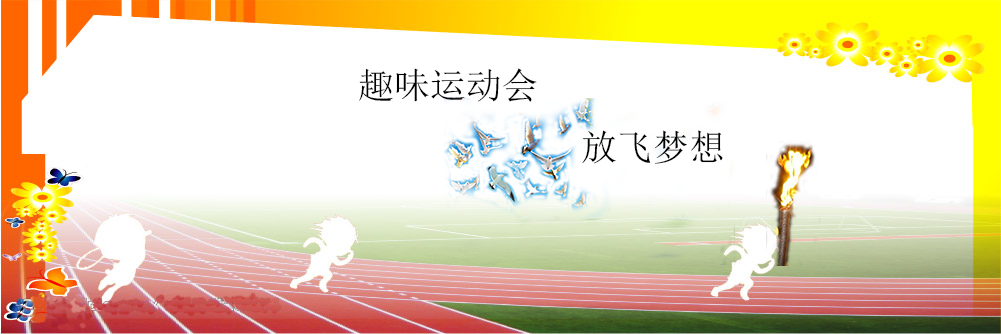
<style>
.page{position:relative;width:1001px;height:334px;background:#ffffff}
.page>*{position:absolute;margin:0}
.t1{font:36px "SimSun";color:#000000}
</style>
<div class="page">
<p class="t1" style="left:359px;top:68px;width:178px;height:34px">趣味运动会</p>
<p class="t1" style="left:582px;top:130px;width:141px;height:34px">放飞梦想</p>
</div>
